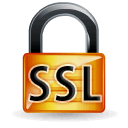
<style>
.page{position:relative;width:128px;height:128px;background:#ffffff}
.page>*{position:absolute;margin:0}
.t1{font:53.4px "MyriadPro-BoldCond";letter-spacing:0.04em;scale:1.12 1}
</style>
<div class="page">
<p class="t1" style="left:28px;top:65px;width:74px;height:37px">SSL</p>
</div>
